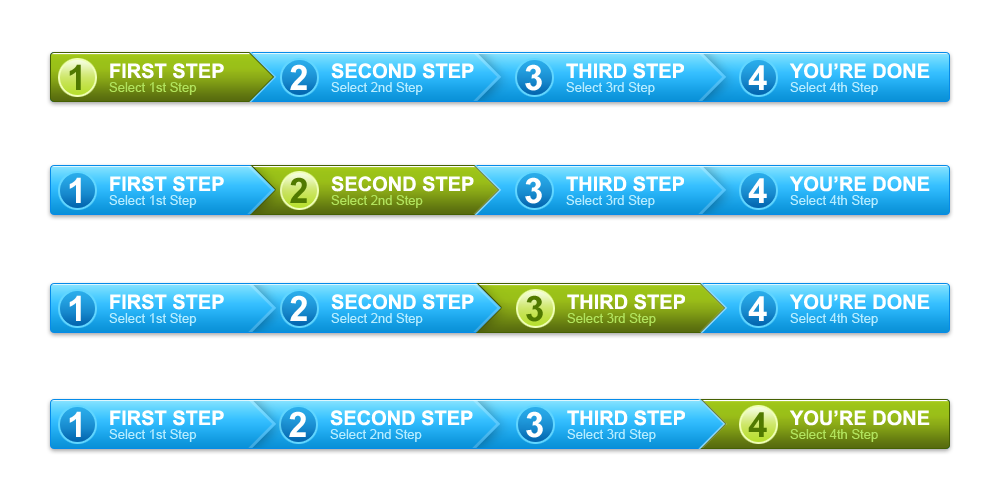
<style>
.page{position:relative;width:1000px;height:500px;background:#ffffff}
.page>*{position:absolute;margin:0}
.t1{font:35px "Arial-BoldMT";letter-spacing:-0.05em;color:#4f7800}
.t2{font:20px "Arial-BoldMT";color:#ffffff;text-transform:uppercase}
.t3{font:35px "Arial-BoldMT";letter-spacing:-0.05em;color:#ffffff}
.t4{font:20px "Arial-BoldMT";color:#fffefe;text-transform:uppercase}
.t5{font:13px "ArialMT";color:#b1e35d}
.t6{font:13px "ArialMT";color:#b5ecff}
.t7{font:13px "ArialMT";color:#b6ecff}
.t8{font:35px "Arial-BoldMT";letter-spacing:-0.05em;color:#507900}
</style>
<div class="page">
<p class="t1" style="left:69px;top:64px;width:12px;height:26px">1</p>
<p class="t2" style="left:110px;top:63px;width:114px;height:16px">First Step</p>
<p class="t3" style="left:290px;top:64px;width:17px;height:26px">2</p>
<p class="t4" style="left:331px;top:63px;width:143px;height:16px">Second Step</p>
<p class="t3" style="left:525px;top:64px;width:17px;height:27px">3</p>
<p class="t2" style="left:566px;top:63px;width:118px;height:16px">third Step</p>
<p class="t3" style="left:748px;top:65px;width:19px;height:25px">4</p>
<p class="t2" style="left:789px;top:63px;width:141px;height:16px">you’re done</p>
<p class="t5" style="left:109px;top:82px;width:88px;height:13px">Select 1st Step</p>
<p class="t6" style="left:331px;top:82px;width:92px;height:13px">Select 2nd Step</p>
<p class="t7" style="left:566px;top:82px;width:89px;height:13px">Select 3rd Step</p>
<p class="t7" style="left:790px;top:82px;width:88px;height:13px">Select 4th Step</p>
<p class="t3" style="left:69px;top:177px;width:12px;height:26px">1</p>
<p class="t2" style="left:110px;top:176px;width:114px;height:16px">First Step</p>
<p class="t8" style="left:290px;top:177px;width:17px;height:26px">2</p>
<p class="t2" style="left:331px;top:176px;width:143px;height:16px">Second Step</p>
<p class="t3" style="left:525px;top:177px;width:17px;height:27px">3</p>
<p class="t2" style="left:566px;top:176px;width:118px;height:16px">third Step</p>
<p class="t3" style="left:748px;top:178px;width:19px;height:25px">4</p>
<p class="t2" style="left:789px;top:176px;width:141px;height:16px">you’re done</p>
<p class="t6" style="left:109px;top:195px;width:88px;height:13px">Select 1st Step</p>
<p class="t5" style="left:331px;top:195px;width:92px;height:13px">Select 2nd Step</p>
<p class="t6" style="left:566px;top:195px;width:89px;height:13px">Select 3rd Step</p>
<p class="t6" style="left:790px;top:195px;width:88px;height:13px">Select 4th Step</p>
<p class="t2" style="left:110px;top:294px;width:114px;height:16px">First Step</p>
<p class="t2" style="left:331px;top:294px;width:143px;height:16px">Second Step</p>
<p class="t2" style="left:567px;top:294px;width:118px;height:16px">third Step</p>
<p class="t2" style="left:789px;top:294px;width:141px;height:16px">you’re done</p>
<p class="t3" style="left:69px;top:295px;width:12px;height:26px">1</p>
<p class="t3" style="left:290px;top:295px;width:17px;height:26px">2</p>
<p class="t8" style="left:526px;top:295px;width:17px;height:27px">3</p>
<p class="t3" style="left:748px;top:296px;width:19px;height:25px">4</p>
<p class="t6" style="left:109px;top:313px;width:88px;height:13px">Select 1st Step</p>
<p class="t6" style="left:331px;top:313px;width:92px;height:13px">Select 2nd Step</p>
<p class="t5" style="left:567px;top:313px;width:89px;height:13px">Select 3rd Step</p>
<p class="t6" style="left:790px;top:313px;width:88px;height:13px">Select 4th Step</p>
<p class="t3" style="left:69px;top:411px;width:12px;height:26px">1</p>
<p class="t2" style="left:110px;top:410px;width:114px;height:16px">First Step</p>
<p class="t3" style="left:289px;top:411px;width:17px;height:26px">2</p>
<p class="t2" style="left:330px;top:410px;width:143px;height:16px">Second Step</p>
<p class="t3" style="left:526px;top:411px;width:17px;height:27px">3</p>
<p class="t2" style="left:567px;top:410px;width:118px;height:16px">third Step</p>
<p class="t8" style="left:748px;top:412px;width:19px;height:25px">4</p>
<p class="t2" style="left:789px;top:410px;width:141px;height:16px">you’re done</p>
<p class="t6" style="left:109px;top:429px;width:88px;height:13px">Select 1st Step</p>
<p class="t6" style="left:330px;top:429px;width:92px;height:13px">Select 2nd Step</p>
<p class="t6" style="left:567px;top:429px;width:89px;height:13px">Select 3rd Step</p>
<p class="t5" style="left:790px;top:429px;width:88px;height:13px">Select 4th Step</p>
</div>
